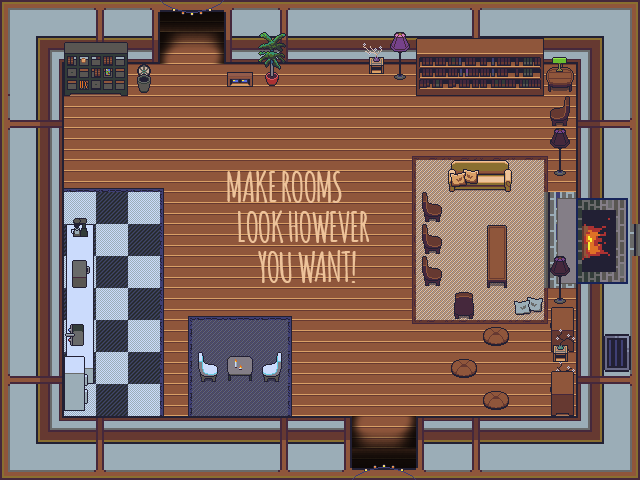
<style>
.page{position:relative;width:640px;height:480px;background:#8f563b}
.page>*{position:absolute;margin:0}
.t1{font:40px/40px "Amatic-Bold";color:#eec39a}
</style>
<div class="page">
<p class="t1" style="left:227px;top:170px;width:143px;height:113px;text-align:right">MAKE ROOMS      <br>LOOK HOWEVER<br>YOU WANT!</p>
</div>
